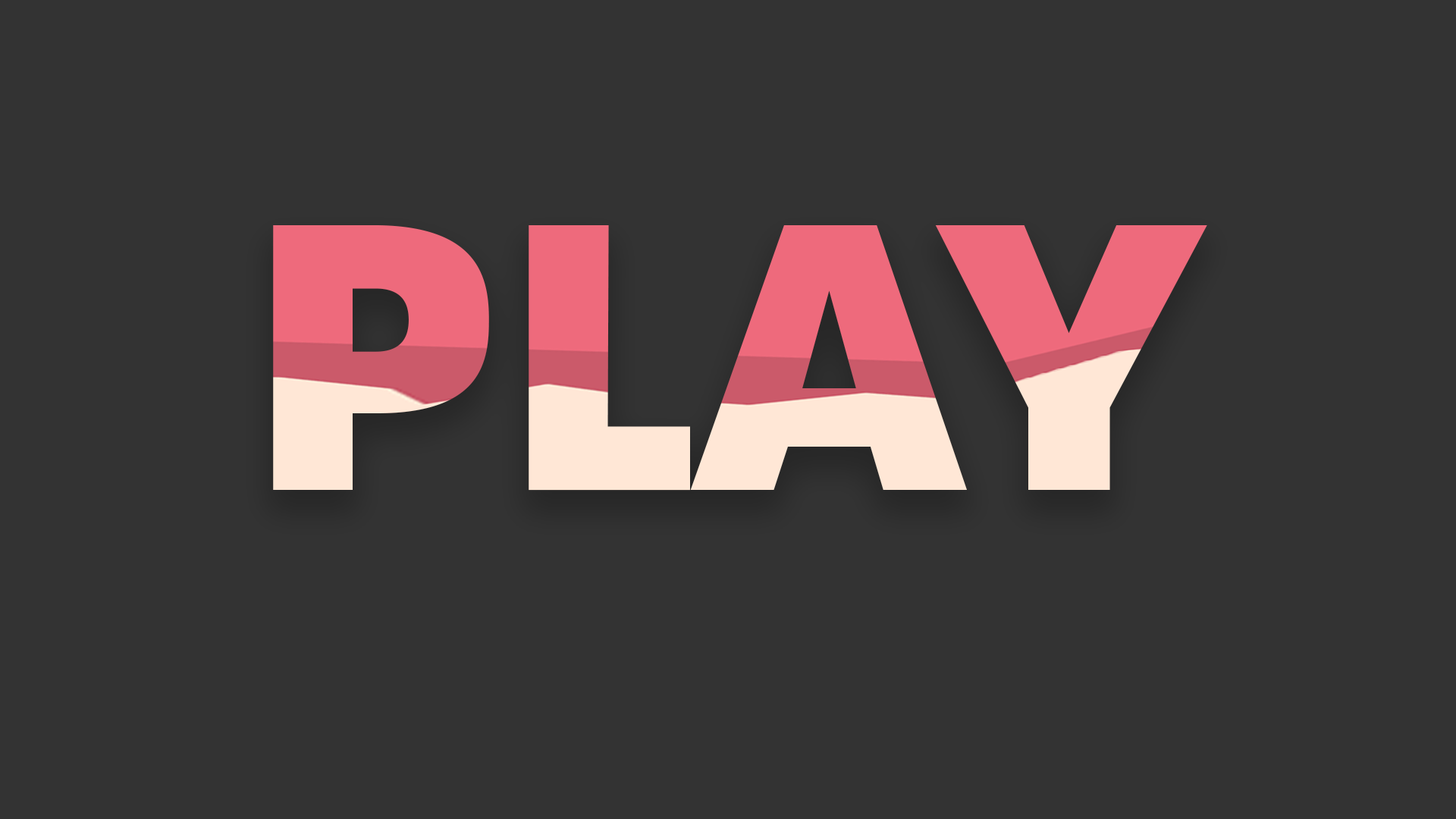
<style>
.page{position:relative;width:1456px;height:819px;background:#333333}
.page>*{position:absolute;margin:0}
.t1{font:413.6px "Paralucent-Heavy"}
</style>
<div class="page">
<p class="t1" style="left:273px;top:225px;width:934px;height:266px">PLAY</p>
</div>
